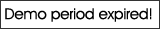
<style>
.page{position:relative;width:160px;height:29px;background:#ffffff}
.page>*{position:absolute;margin:0}
.t1{font:14.9px "AvantGardeITCbyBT-Book";color:#000000}
</style>
<div class="page">
<p class="t1" style="left:5px;top:8px;width:147px;height:14px">Demo period expired!</p>
</div>
